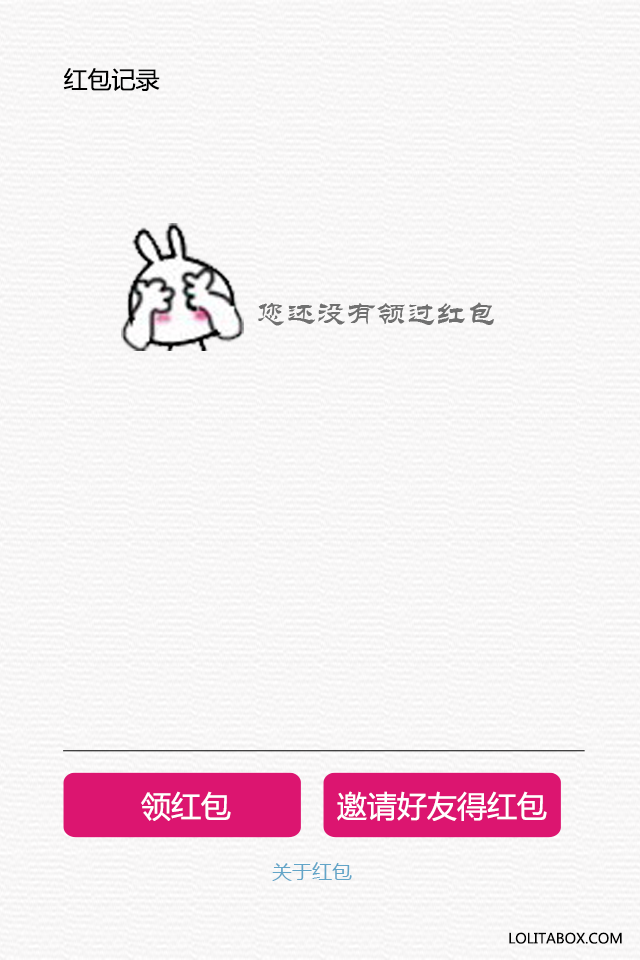
<style>
.page{position:relative;width:640px;height:960px}
.page>*{position:absolute;margin:0}
.t1{font:24px "MicrosoftYaHei";color:#000000}
.t2{font:30px "STLiti";color:#707070}
.t3{font:30px "MicrosoftYaHei";color:#ffffff}
.t4{font:20px "MicrosoftYaHei";color:#62a5c8}
.t5{font:14px "MicrosoftYaHei";color:#000000}
</style>
<div class="page">
<p class="t1" style="left:63px;top:68px;width:97px;height:23px">红包记录</p>
<p class="t2" style="left:258px;top:302px;width:236px;height:24px">您还没有领过红包</p>
<p class="t3" style="left:141px;top:791px;width:90px;height:30px">领红包</p>
<p class="t3" style="left:337px;top:791px;width:210px;height:30px">邀请好友得红包</p>
<p class="t4" style="left:272px;top:862px;width:80px;height:19px">关于红包</p>
<p class="t5" style="left:509px;top:932px;width:113px;height:12px">LOLITABOX.COM</p>
</div>
